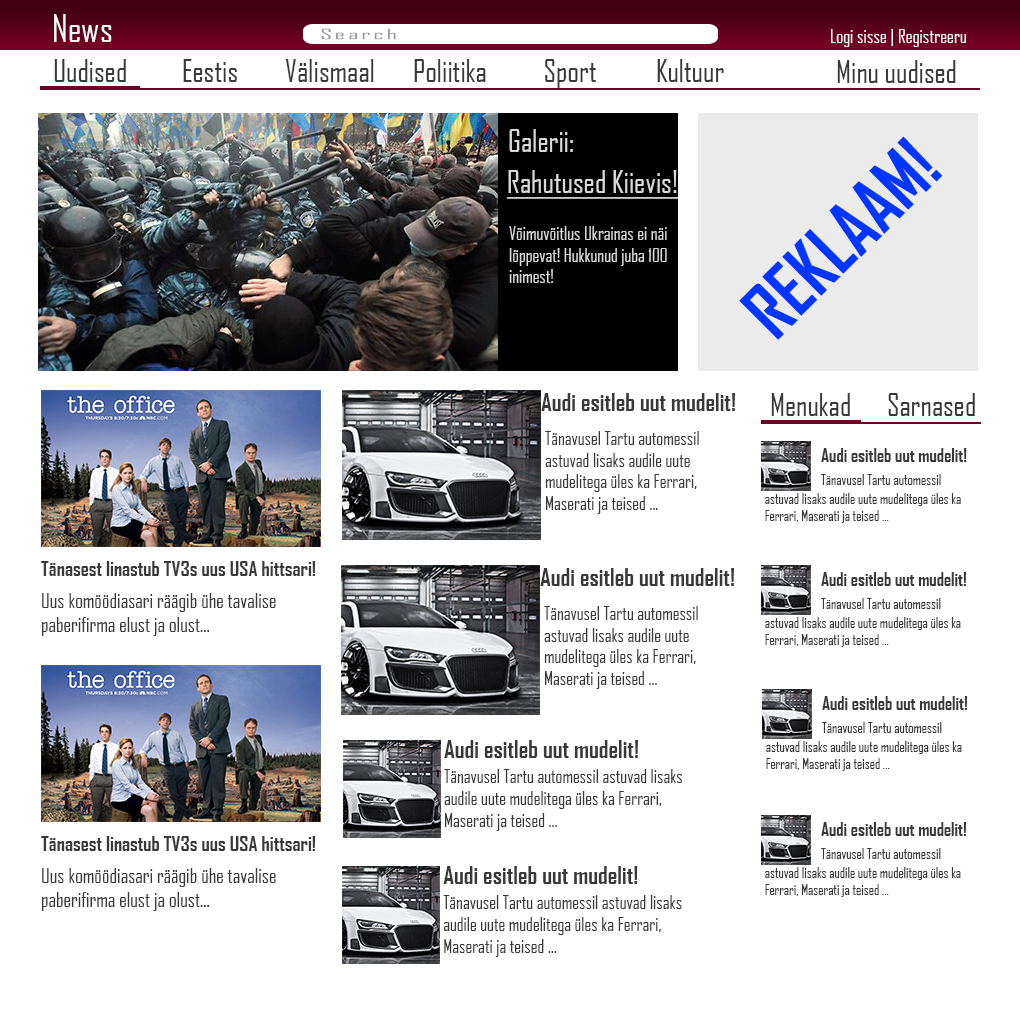
<style>
.page{position:relative;width:1020px;height:1020px;background:#ffffff}
.page>*{position:absolute;margin:0}
.t1{font:36px "AgencyFB-Reg";color:#ffffff}
.t2{font:13.9px "AgencyFB-Reg";letter-spacing:0.1em;color:#989898;scale:2.03 1}
.t3{font:17.6px "AgencyFB-Reg";color:#ffffff;scale:1.05 1}
.t4{font:30px "AgencyFB-Reg";color:#393939}
.t5{font:29.6px "AgencyFB-Reg";color:#393939}
.t6{font:29.6px "AgencyFB-Reg";color:#d9d9d9}
.t7{font:72px "AgencyFB-Bold";color:#0036ff}
.t8{font:29.6px "AgencyFB-Reg";color:#d9d9d9;text-decoration:underline}
.t9{font:18.1px "AgencyFB-Reg";color:#d9d9d9}
.t10{font:24px "AgencyFB-Bold";color:#393939}
.t11{font:18px "AgencyFB-Reg";color:#393939}
.t12{font:18px "AgencyFB-Bold";color:#393939}
.t13{font:14px "AgencyFB-Reg";color:#393939}
.t14{font:13.9px "AgencyFB-Reg";color:#393939}
.t15{font:20px "AgencyFB-Bold";color:#393939}
.t16{font:20px "AgencyFB-Reg";color:#393939}
.t17{font:24.1px "AgencyFB-Bold";color:#393939}
.t18{font:18.2px "AgencyFB-Reg";color:#393939}
</style>
<div class="page">
<p class="t1" style="left:54px;top:14px;width:58px;height:28px">News</p>
<p class="t2" style="left:321px;top:28px;width:75px;height:12px">Search</p>
<p class="t3" style="left:831px;top:29px;width:135px;height:18px">Logi sisse | Registreeru</p>
<p class="t4" style="left:54px;top:59px;width:72px;height:23px">Uudised</p>
<p class="t4" style="left:183px;top:59px;width:54px;height:23px">Eestis</p>
<p class="t4" style="left:285px;top:59px;width:89px;height:23px">Välismaal</p>
<p class="t4" style="left:414px;top:59px;width:72px;height:23px">Poliitika</p>
<p class="t4" style="left:545px;top:59px;width:51px;height:29px">Sport</p>
<p class="t4" style="left:657px;top:59px;width:67px;height:23px">Kultuur</p>
<p class="t5" style="left:837px;top:60px;width:119px;height:23px">Minu uudised</p>
<p class="t6" style="left:509px;top:129px;width:64px;height:23px">Galerii:</p>
<p class="t7" style="left:739px;top:136px;width:204px;height:204px;rotate:-45deg">REKLAAM!</p>
<p class="t8" style="left:506px;top:170px;width:172px;height:29px">Rahutused Kiievis!</p>
<p class="t9" style="left:509px;top:226px;width:158px;height:57px">Võimuvõitlus Ukrainas ei näi <br>lõppevat! Hukkunud juba 100 <br>inimest!</p>
<p class="t10" style="left:541px;top:393px;width:194px;height:18px">Audi esitleb uut mudelit!</p>
<p class="t5" style="left:771px;top:393px;width:79px;height:23px">Menukad</p>
<p class="t5" style="left:888px;top:393px;width:87px;height:23px">Sarnased</p>
<p class="t11" style="left:545px;top:431px;width:154px;height:83px">Tänavusel Tartu automessil<br>astuvad lisaks audile uute <br>mudelitega üles ka Ferrari,<br>Maserati ja teised ...</p>
<p class="t12" style="left:821px;top:448px;width:146px;height:14px">Audi esitleb uut mudelit!</p>
<p class="t13" style="left:821px;top:474px;width:120px;height:11px">Tänavusel Tartu automessil</p>
<p class="t14" style="left:765px;top:493px;width:196px;height:30px">astuvad lisaks audile uute mudelitega üles ka <br>Ferrari, Maserati ja teised ...</p>
<p class="t15" style="left:41px;top:561px;width:275px;height:15px">Tänasest linastub TV3s uus USA hittsari!</p>
<p class="t10" style="left:540px;top:568px;width:194px;height:18px">Audi esitleb uut mudelit!</p>
<p class="t12" style="left:821px;top:572px;width:146px;height:14px">Audi esitleb uut mudelit!</p>
<p class="t16" style="left:42px;top:593px;width:234px;height:43px">Uus komöödiasari räägib ühe tavalise <br>paberifirma elust ja olust...</p>
<p class="t11" style="left:544px;top:606px;width:154px;height:83px">Tänavusel Tartu automessil<br>astuvad lisaks audile uute <br>mudelitega üles ka Ferrari,<br>Maserati ja teised ...</p>
<p class="t13" style="left:821px;top:598px;width:120px;height:11px">Tänavusel Tartu automessil</p>
<p class="t14" style="left:765px;top:617px;width:196px;height:30px">astuvad lisaks audile uute mudelitega üles ka <br>Ferrari, Maserati ja teised ...</p>
<p class="t12" style="left:822px;top:696px;width:146px;height:14px">Audi esitleb uut mudelit!</p>
<p class="t13" style="left:822px;top:722px;width:120px;height:11px">Tänavusel Tartu automessil</p>
<p class="t17" style="left:444px;top:740px;width:194px;height:18px">Audi esitleb uut mudelit!</p>
<p class="t14" style="left:766px;top:741px;width:196px;height:30px">astuvad lisaks audile uute mudelitega üles ka <br>Ferrari, Maserati ja teised ...</p>
<p class="t18" style="left:444px;top:769px;width:238px;height:62px">Tänavusel Tartu automessil astuvad lisaks<br>audile uute mudelitega üles ka Ferrari,<br>Maserati ja teised ...</p>
<p class="t12" style="left:821px;top:822px;width:146px;height:14px">Audi esitleb uut mudelit!</p>
<p class="t15" style="left:41px;top:836px;width:275px;height:15px">Tänasest linastub TV3s uus USA hittsari!</p>
<p class="t13" style="left:821px;top:848px;width:120px;height:11px">Tänavusel Tartu automessil</p>
<p class="t16" style="left:42px;top:868px;width:234px;height:43px">Uus komöödiasari räägib ühe tavalise <br>paberifirma elust ja olust...</p>
<p class="t17" style="left:443px;top:866px;width:195px;height:18px">Audi esitleb uut mudelit!</p>
<p class="t14" style="left:765px;top:867px;width:196px;height:30px">astuvad lisaks audile uute mudelitega üles ka <br>Ferrari, Maserati ja teised ...</p>
<p class="t18" style="left:443px;top:895px;width:239px;height:62px">Tänavusel Tartu automessil astuvad lisaks<br>audile uute mudelitega üles ka Ferrari,<br>Maserati ja teised ...</p>
</div>
